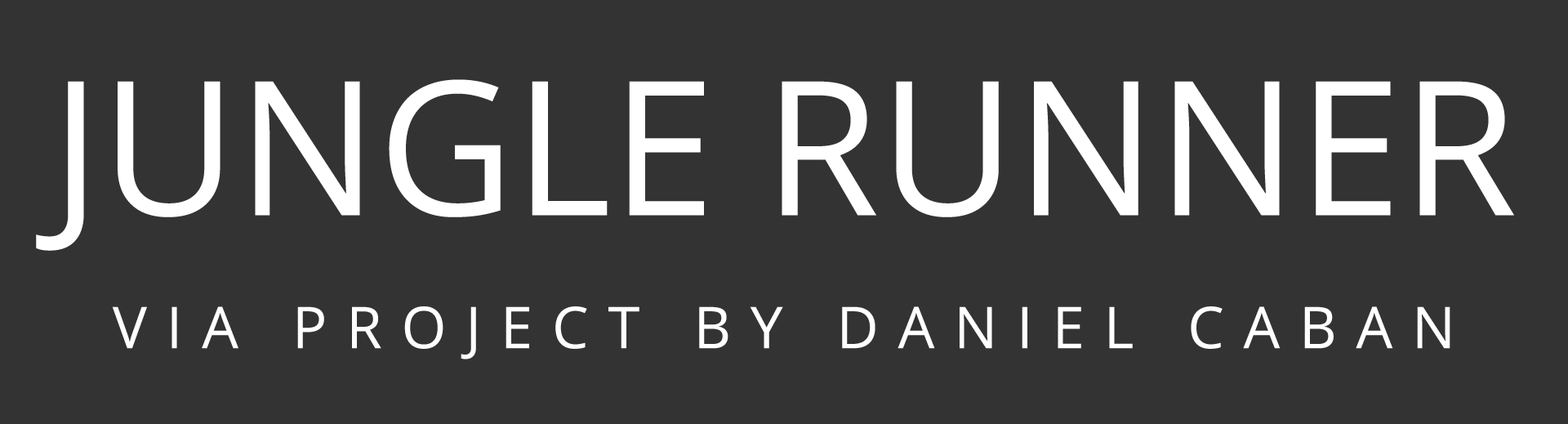
<style>
.page{position:relative;width:1568px;height:424px;background:#333333}
.page>*{position:absolute;margin:0}
.t1{font:187.2px "OpenSans-Regular";color:#ffffff;text-transform:uppercase}
.t2{font:57.5px "OpenSans-Regular";letter-spacing:0.34em;color:#ffffff;text-transform:uppercase}
</style>
<div class="page">
<p class="t1" style="left:36px;top:79px;width:1478px;height:172px">jungle runner</p>
<p class="t2" style="left:112px;top:306px;width:1338px;height:53px">VIA PROJECT by daniel caban</p>
</div>
